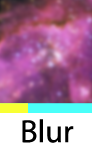
<style>
.page{position:relative;width:92px;height:150px;background:#ffffff}
.page>*{position:absolute;margin:0}
.t1{font:32.3px "MyriadPro-Regular";color:#000000}
</style>
<div class="page">
<p class="t1" style="left:22px;top:119px;width:52px;height:24px">Blur</p>
</div>
